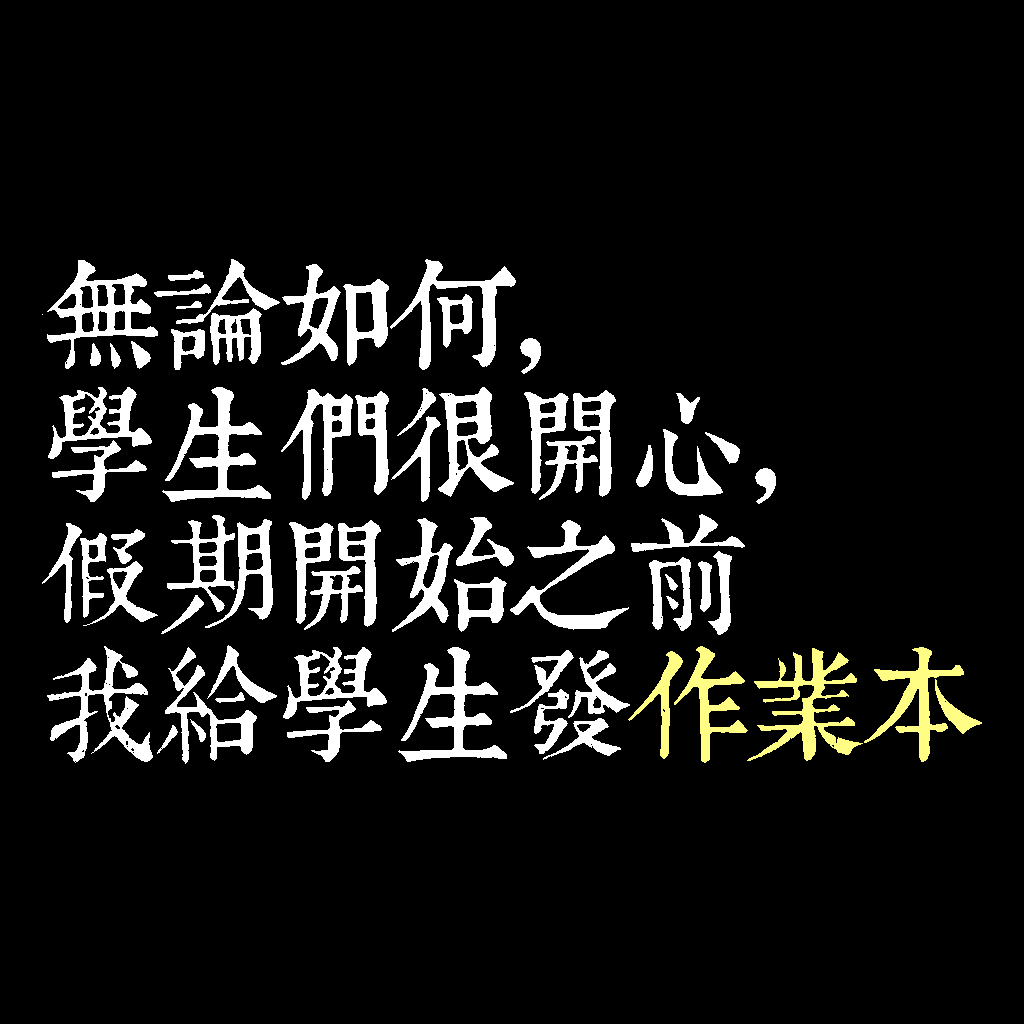
<style>
.page{position:relative;width:1024px;height:1024px;background:#000000}
.page>*{position:absolute;margin:0}
.t1{font:120px/130px "TpldKhangXiDictTrial";letter-spacing:-0.02em;color:#ffffff}
.t2{font:120px/130px "TpldKhangXiDictTrial";letter-spacing:-0.02em;color:#fffd84}
</style>
<div class="page">
<p class="t1" style="left:42px;top:259px;width:940px;height:505px">無論如何，<br>學生們很開心，<br>假期開始之前<br>我給學生發<span class="t2">作業本</span></p>
</div>
